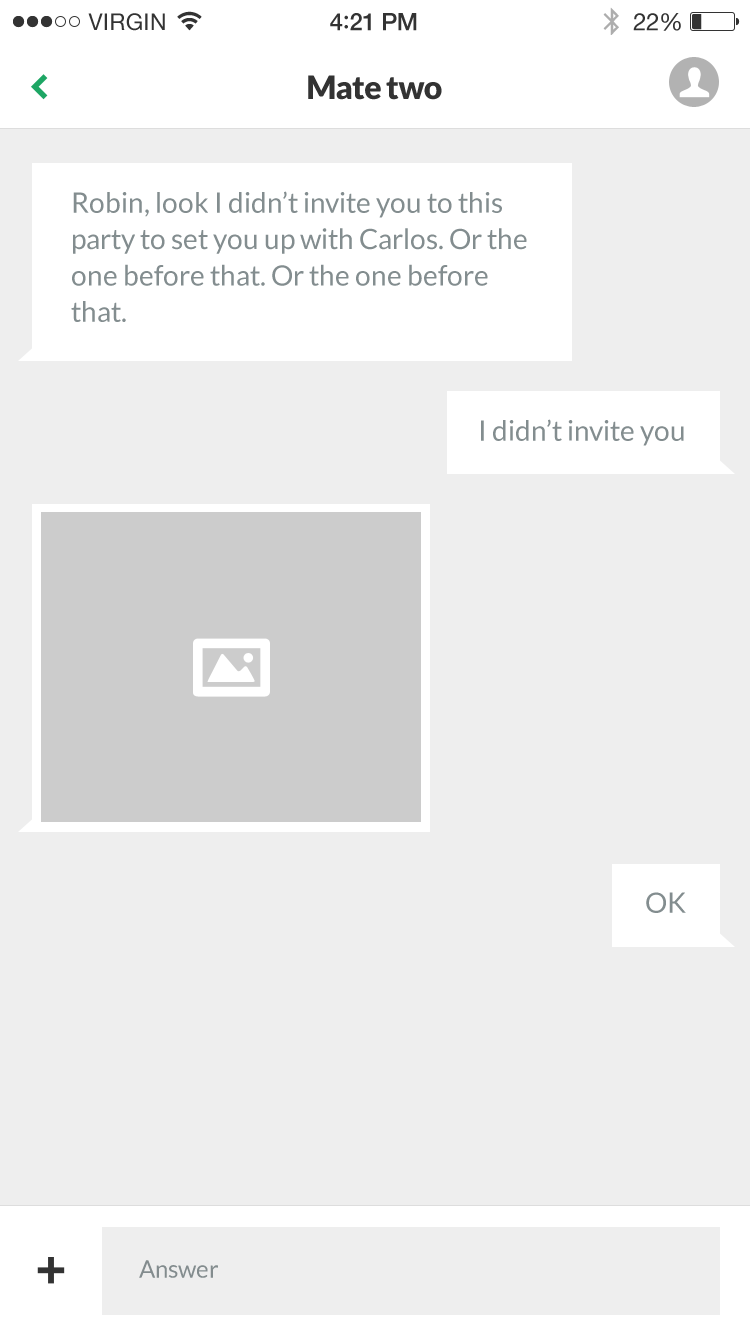
<style>
.page{position:relative;width:750px;height:1334px;background:#eeeeee}
.page>*{position:absolute;margin:0}
.t1{font:32px "Lato-Black";letter-spacing:-0.02em;color:#333333}
.t2{font:28px/36.4px "Lato-Regular";color:#838d8f}
.t3{font:28px "Lato-Regular";color:#838d8f}
.t4{font:24px "Lato-Regular";color:#838c8e}
</style>
<div class="page">
<p class="t1" style="left:308px;top:75px;width:134px;height:25px">Mate two</p>
<p class="t2" style="left:71px;top:191px;width:456px;height:131px">Robin, look I didn’t invite you to this<br>party to set you up with Carlos. Or the<br>one before that. Or the one before<br>that.</p>
<p class="t3" style="left:481px;top:419px;width:203px;height:27px">I didn’t invite you</p>
<p class="t3" style="left:646px;top:892px;width:40px;height:21px">OK</p>
<p class="t4" style="left:139px;top:1260px;width:79px;height:18px">Answer</p>
</div>
